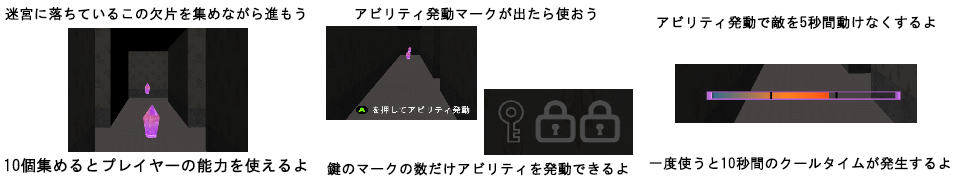
<style>
.page{position:relative;width:960px;height:180px;background:#ffffff}
.page>*{position:absolute;margin:0}
.t1{font:14px "HGGothicM";color:#000000;font-weight:bold}
.t2{font:15.6px "HGGothicM";color:#000000;font-weight:bold}
</style>
<div class="page">
<p class="t1" style="left:5px;top:7px;width:300px;height:14px">迷宮に落ちているこの欠片を集めながら進もう</p>
<p class="t1" style="left:355px;top:7px;width:241px;height:14px">アビリティ発動マークが出たら使おう</p>
<p class="t1" style="left:657px;top:15px;width:278px;height:14px">アビリティ発動で敵を5秒間動けなくするよ</p>
<p class="t2" style="left:5px;top:158px;width:302px;height:15px">10個集めるとプレイヤーの能力を使えるよ</p>
<p class="t1" style="left:649px;top:156px;width:301px;height:14px">一度使うと10秒間のクールタイムが発生するよ</p>
<p class="t1" style="left:327px;top:162px;width:301px;height:14px">鍵のマークの数だけアビリティを発動できるよ</p>
</div>
